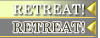
<style>
.page{position:relative;width:100px;height:38px;background:#7f7f7f}
.page>*{position:absolute;margin:0}
.t1{font:13.3px "CenturySchoolbook";letter-spacing:0.025em;color:#ffffff}
.t2{font:13.3px "CenturySchoolbook";letter-spacing:0.025em;color:#48411d}
</style>
<div class="page">
<p class="t1" style="left:13px;top:4px;width:71px;height:11px">RETREAT!</p>
<p class="t2" style="left:13px;top:22px;width:71px;height:11px">RETREAT!</p>
</div>
